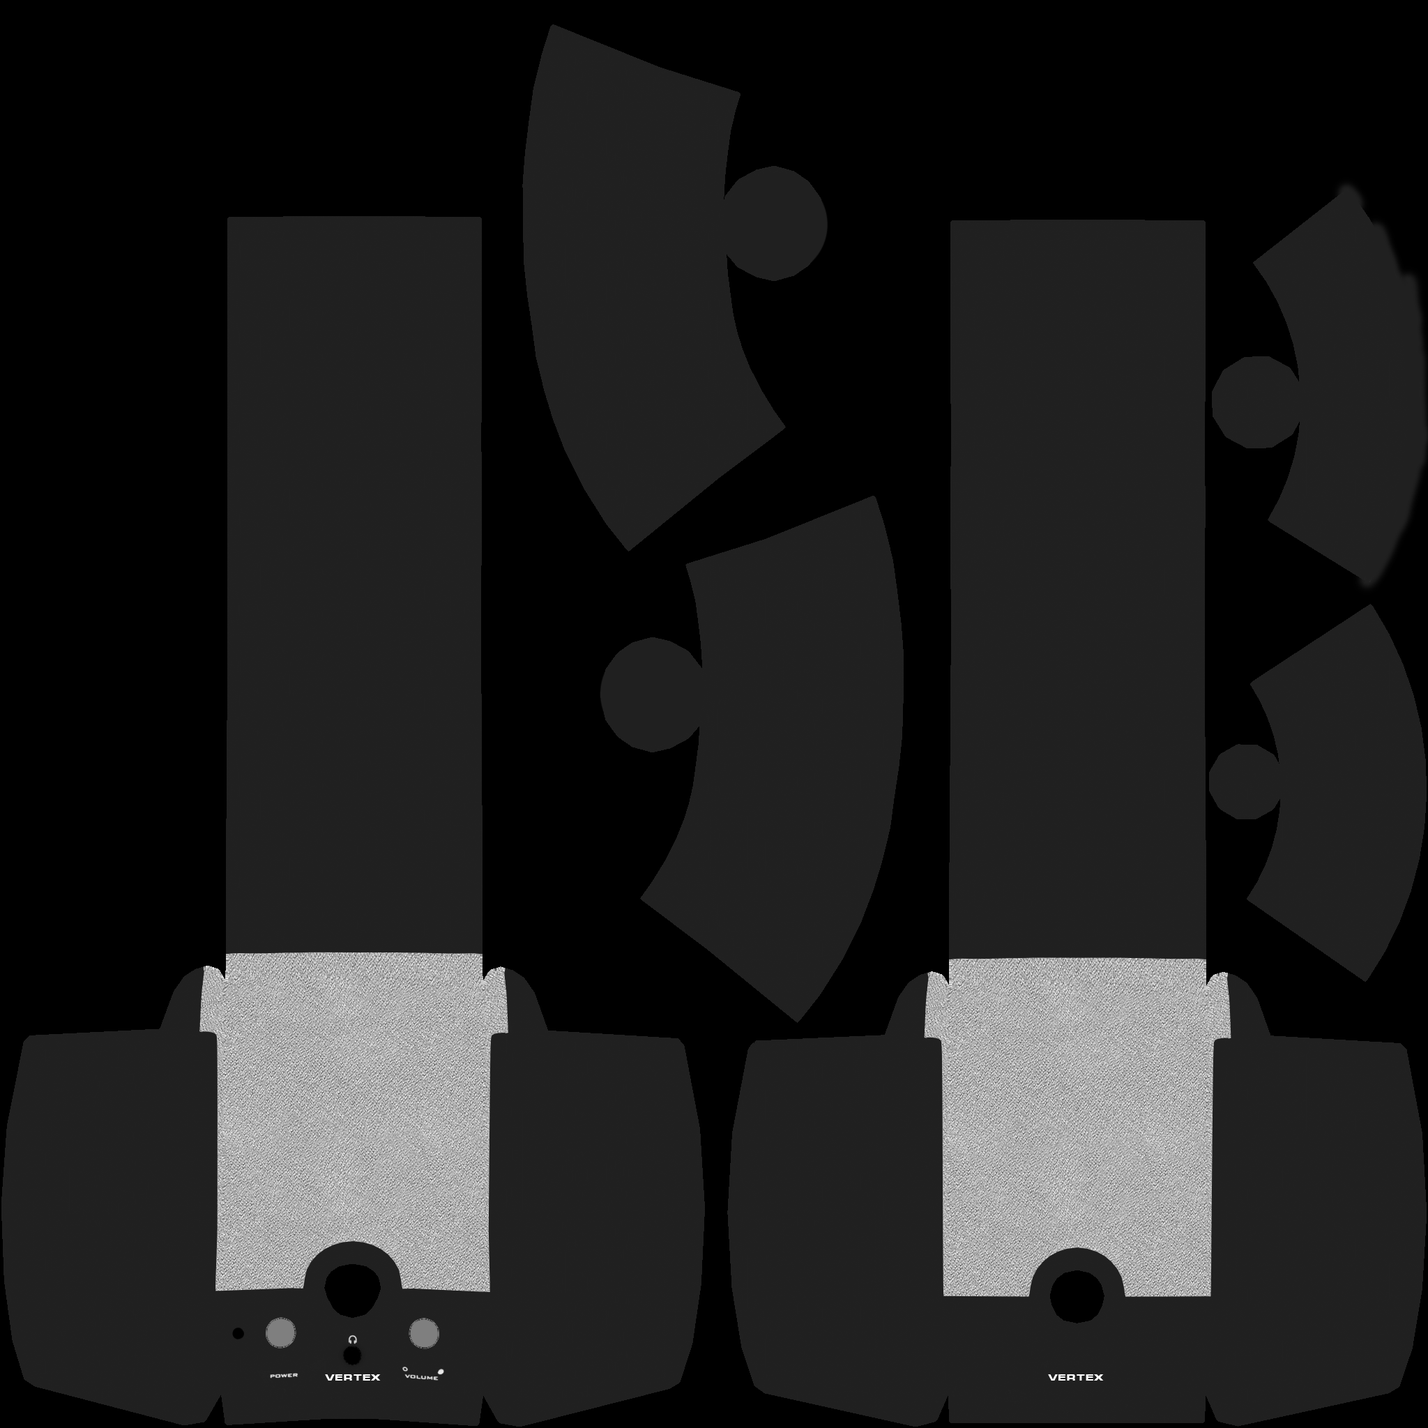
<style>
.page{position:relative;width:1428px;height:1428px;background:#202020}
.page>*{position:absolute;margin:0}
.t1{font:9px "Micra-Bold";color:#ffffff}
</style>
<div class="page">
<p class="t1" style="left:325px;top:1374px;width:56px;height:7px">VERTEX</p>
<p class="t1" style="left:1048px;top:1374px;width:56px;height:7px">VERTEX</p>
</div>
